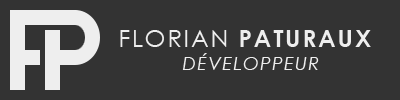
<style>
.page{position:relative;width:400px;height:100px;background:#333333}
.page>*{position:absolute;margin:0}
.t1{font:24px "CenturyGothic-Bold";letter-spacing:0.075em;color:#eeeeee}
.t2{font:24px "CenturyGothic";letter-spacing:0.075em;color:#eeeeee}
.t3{font:18px "CenturyGothic-Italic";letter-spacing:0.075em;color:#eeeeee}
</style>
<div class="page">
<p class="t1" style="left:120px;top:30px;width:251px;height:17px"><span class="t2">FLORIAN </span>PATURAUX</p>
<p class="t3" style="left:182px;top:53px;width:137px;height:17px">DÉVELOPPEUR</p>
</div>
